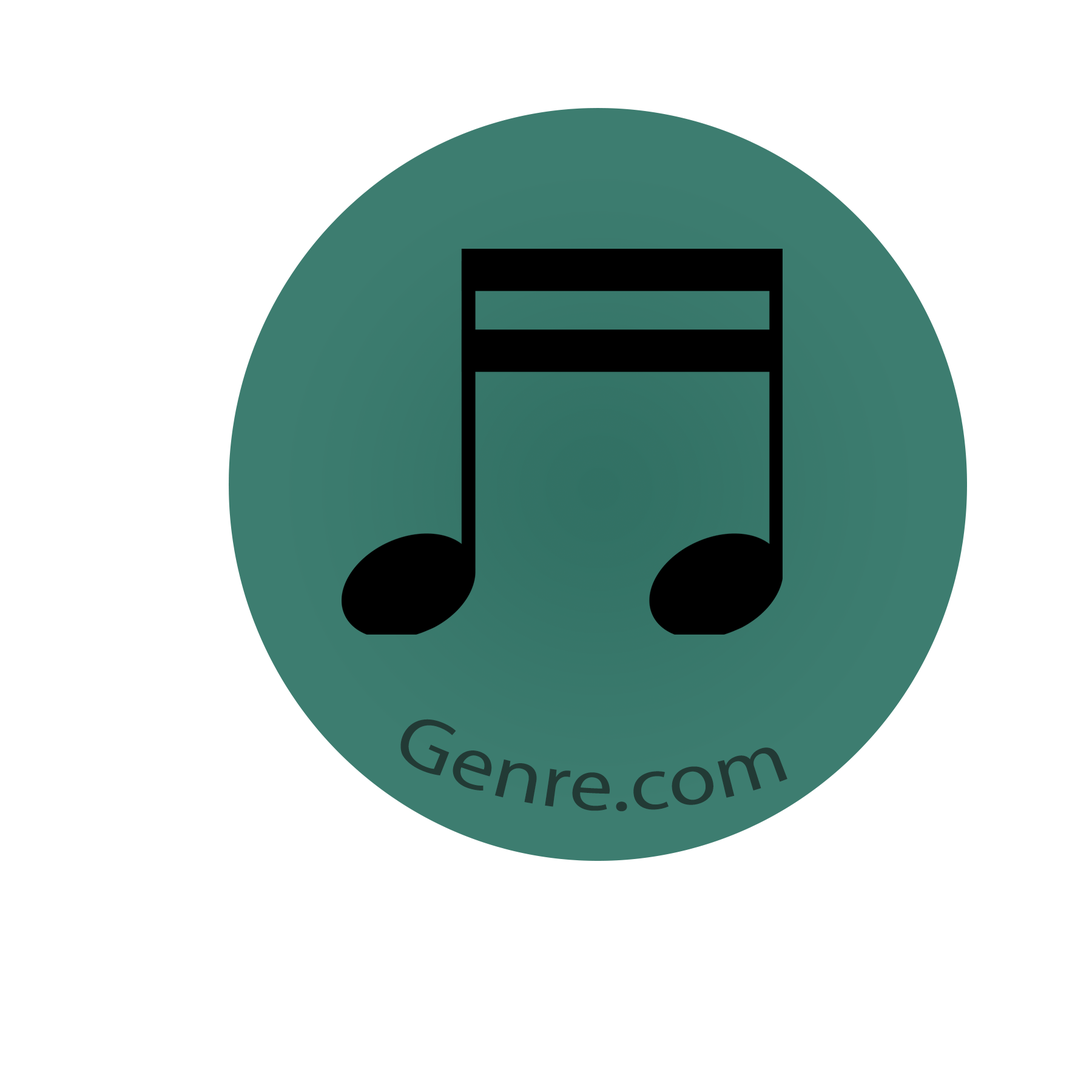
<style>
.page{position:relative;width:1092px;height:1092px;background:#ffffff}
.page>*{position:absolute;margin:0}
.t1{font:75.8px "MyriadPro-Regular";color:#223a35}
</style>
<div class="page">
<p class="t1" style="left:400px;top:719px;width:387px;height:93px;rotate:-4deg">Genre.com</p>
</div>
